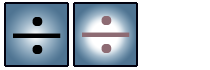
<style>
.page{position:relative;width:210px;height:70px;background:#ffffff}
.page>*{position:absolute;margin:0}
.t1{font:68.1px "BookAntiqua";color:#000101;font-weight:bold}
.t2{font:68.1px "BookAntiqua";color:#8e6b74;font-weight:bold}
.t3{font:48.6px "BookAntiqua";color:#000101;font-weight:bold}
.t4{font:48.6px "BookAntiqua";color:#8e6b74;font-weight:bold}
</style>
<div class="page">
<p class="t1" style="left:32px;top:17px;width:11px;height:9px">.</p>
<p class="t2" style="left:101px;top:16px;width:11px;height:9px">.</p>
<p class="t3" style="left:13px;top:33px;width:48px;height:5px;rotate:90deg">|</p>
<p class="t4" style="left:82px;top:32px;width:48px;height:5px;rotate:90deg">|</p>
<p class="t1" style="left:32px;top:45px;width:11px;height:9px">.</p>
<p class="t2" style="left:101px;top:44px;width:11px;height:9px">.</p>
</div>
